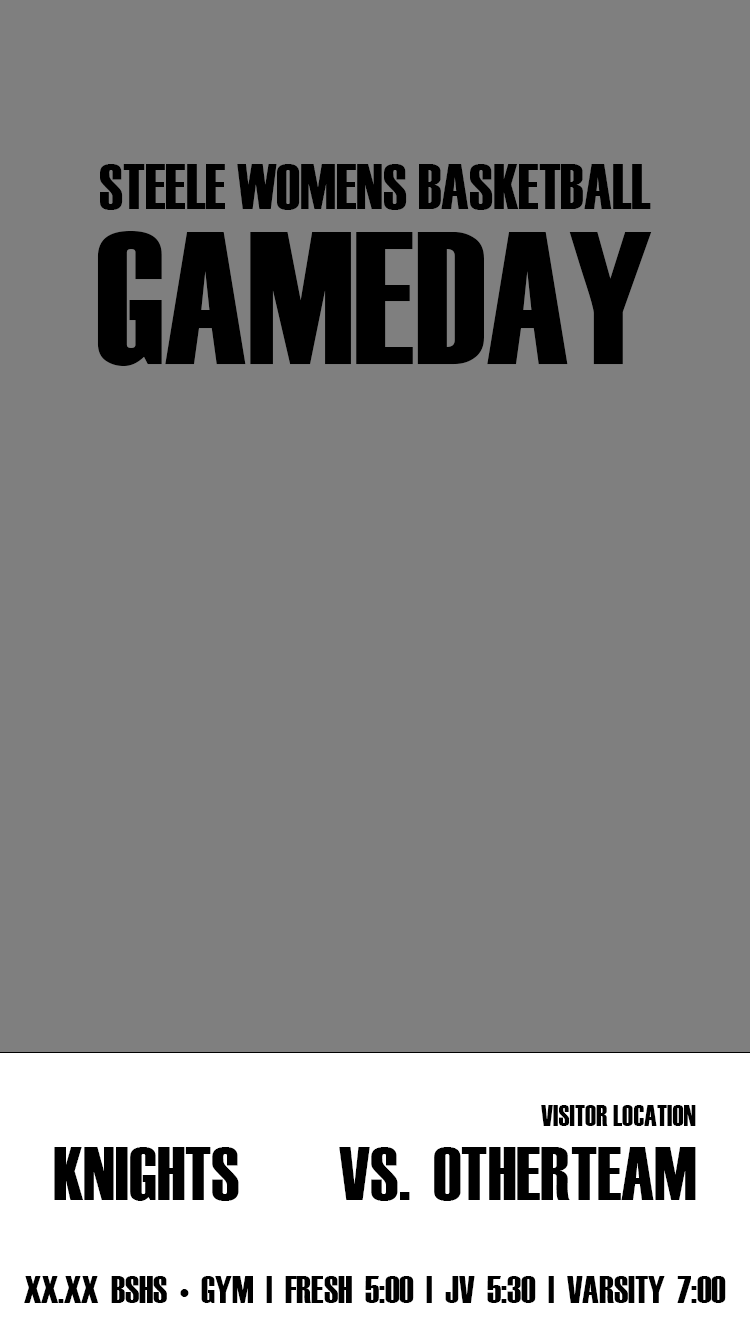
<style>
.page{position:relative;width:750px;height:1334px;background:#7f7f7f}
.page>*{position:absolute;margin:0}
.t1{font:62.5px "Haettenschweiler";color:#000000}
.t2{font:187.5px "Haettenschweiler";color:#000000}
.t3{font:29.2px "Haettenschweiler";color:#000000;text-transform:uppercase}
.t4{font:75px "Haettenschweiler";color:#000000;text-transform:uppercase}
.t5{font:37.5px "Haettenschweiler";color:#000000;text-transform:uppercase}
</style>
<div class="page">
<p class="t1" style="left:100px;top:164px;width:551px;height:46px">STEELE WOMENS BASKETBALL</p>
<p class="t2" style="left:97px;top:231px;width:555px;height:135px">GAMEDAY</p>
<p class="t3" style="left:541px;top:1105px;width:155px;height:21px">visitor location</p>
<p class="t4" style="left:54px;top:1147px;width:185px;height:54px">KNIGHTS</p>
<p class="t4" style="left:339px;top:1147px;width:71px;height:54px">VS.</p>
<p class="t4" style="left:434px;top:1147px;width:262px;height:54px">OTHERTEAM</p>
<p class="t5" style="left:24px;top:1276px;width:702px;height:27px">XX.XX BSHS • GYM | fresh 5:00 | JV 5:30 | varsity 7:00</p>
</div>
